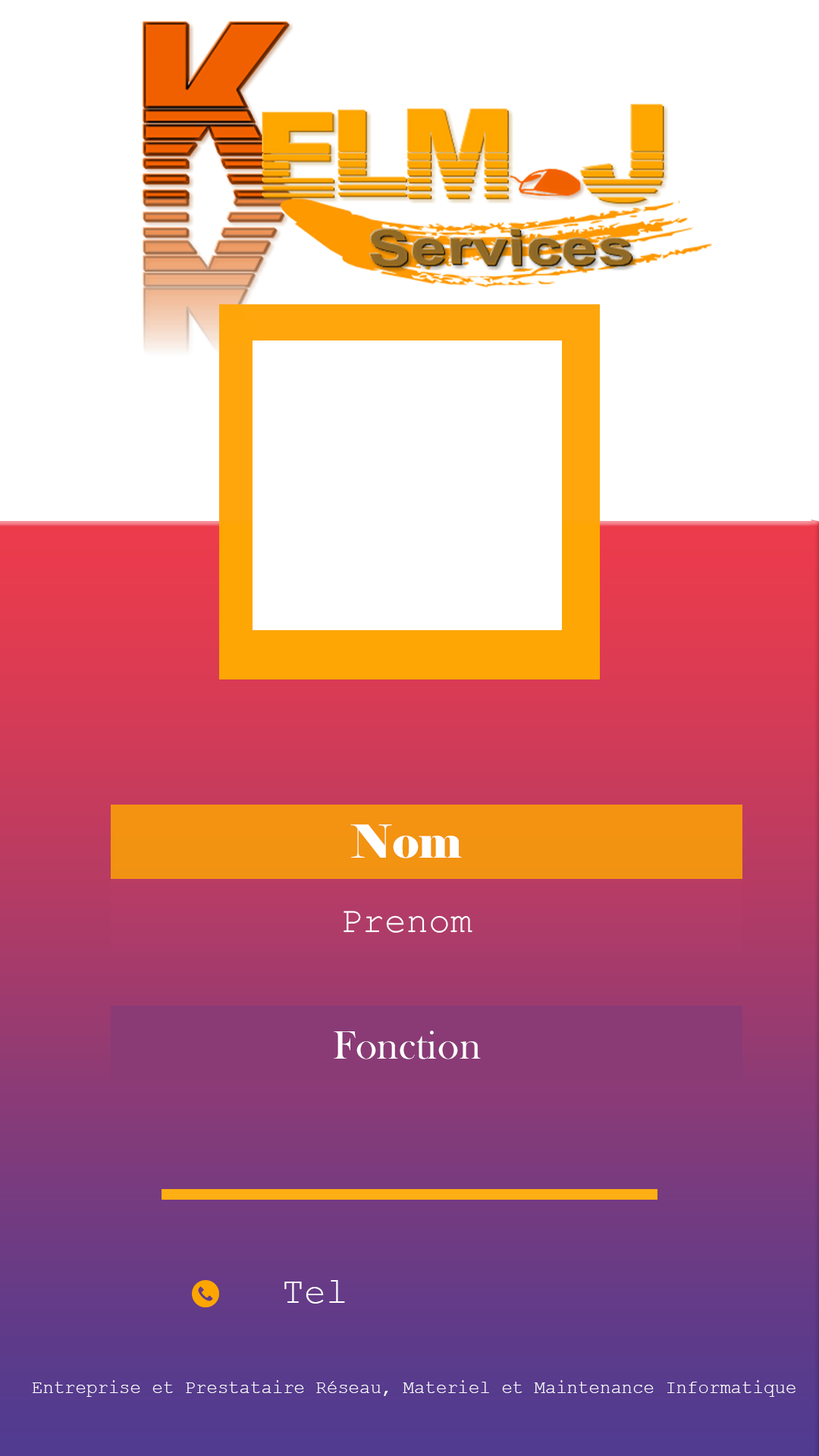
<style>
.page{position:relative;width:819px;height:1456px;background:#ffffff}
.page>*{position:absolute;margin:0}
.t1{font:45.5px "Elephant-Regular";letter-spacing:0.005em;color:#ffffff}
.t2{font:36.4px "CourierNewPSMT";letter-spacing:0.005em;color:#ffffff}
.t3{font:40.9px "BaskOldFace";letter-spacing:0.01em;color:#ffffff}
.t4{font:36.4px "CourierNewPSMT";color:#ffffff}
.t5{font:18.2px "CourierNewPSMT";color:#ffffff}
</style>
<div class="page">
<p class="t1" style="left:350px;top:824px;width:112px;height:34px">Nom</p>
<p class="t2" style="left:344px;top:911px;width:128px;height:22px">Prenom</p>
<p class="t3" style="left:334px;top:1031px;width:147px;height:28px">Fonction</p>
<p class="t4" style="left:284px;top:1280px;width:61px;height:24px">Tel</p>
<p class="t5" style="left:33px;top:1380px;width:762px;height:17px">Entreprise et Prestataire Réseau, Materiel et Maintenance Informatique</p>
</div>
